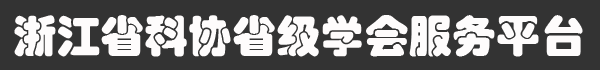
<style>
.page{position:relative;width:600px;height:70px;background:#333333}
.page>*{position:absolute;margin:0}
.t1{font:44px "STHupo";color:#fefcfc}
</style>
<div class="page">
<p class="t1" style="left:14px;top:15px;width:569px;height:42px">浙江省科协省级学会服务平台</p>
</div>
